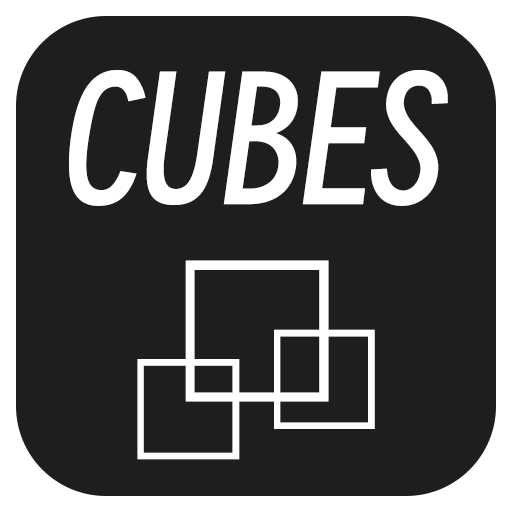
<style>
.page{position:relative;width:512px;height:512px;background:#1e1e1e}
.page>*{position:absolute;margin:0}
.t1{font:163.9px "SmileySans-Oblique";color:#ffffff}
.t2{font:192.6px "AdobeHeitiStd-Regular";color:#ffffff}
.t3{font:135.7px "AdobeHeitiStd-Regular";color:#ffffff}
.t4{font:137px "AdobeHeitiStd-Regular";color:#ffffff}
</style>
<div class="page">
<p class="t1" style="left:69px;top:70px;width:379px;height:136px">CUBES</p>
<p class="t2" style="left:185px;top:260px;width:144px;height:142px">□</p>
<p class="t3" style="left:274px;top:329px;width:101px;height:100px">□</p>
<p class="t4" style="left:137px;top:359px;width:103px;height:101px">□</p>
</div>
